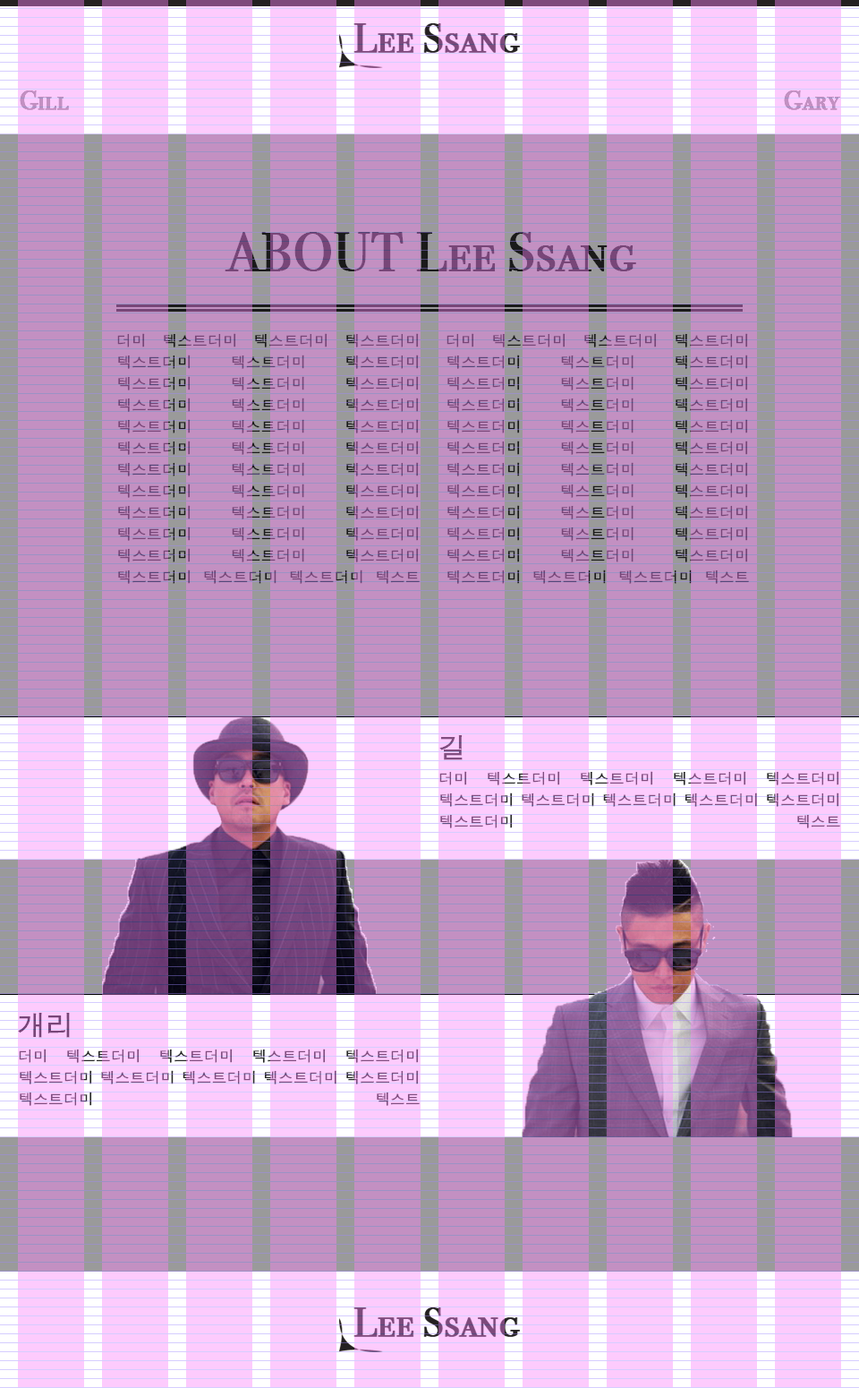
<style>
.page{position:relative;width:859px;height:1388px}
.page>*{position:absolute;margin:0}
.t1{font:26.9px "BodoniSvtyTwoSCITCTT-Book";letter-spacing:-0.005em;color:#c390c2;font-weight:bold}
.t2{font:54.6px "BodoniSvtyTwoSCITCTT-Book";letter-spacing:-0.005em;font-weight:bold}
.t3{font:14.3px "AppleGothic";letter-spacing:-0.005em;font-weight:bold}
.t4{font:28px "AppleGothic";letter-spacing:-0.005em;color:#814e80;font-weight:bold}
.t5{font:14.3px "AppleGothic";letter-spacing:-0.005em;color:#814e80;font-weight:bold}
.t6{font:28px "AppleGothic";letter-spacing:-0.005em;color:#784678;font-weight:bold}
</style>
<div class="page">
<p class="t1" style="left:20px;top:90px;width:49px;height:20px">Gill</p>
<p class="t1" style="left:20px;top:90px;width:49px;height:20px">Gill</p>
<p class="t1" style="left:784px;top:90px;width:57px;height:20px">Gary</p>
<p class="t1" style="left:784px;top:90px;width:57px;height:20px">Gary</p>
<p class="t2" style="left:225px;top:232px;width:411px;height:39px">ABOUT Lee Ssang</p>
<p class="t3" style="left:117px;top:333px;width:303px;height:251px;text-align:justify">더미 텍스트더미 텍스트더미 텍스트더미 텍스트더미 텍스트더미 텍스트더미 텍스트더미 텍스트더미 텍스트더미 텍스트더미 텍스트더미 텍스트더미 텍스트더미 텍스트더미 텍스트더미 텍스트더미 텍스트더미 텍스트더미 텍스트더미 텍스트더미 텍스트더미 텍스트더미 텍스트더미 텍스트더미 텍스트더미 텍스트더미 텍스트더미 텍스트더미 텍스트더미 텍스트더미 텍스트더미 텍스트더미 텍스트더미 텍스트더미 텍스트더미 텍스트더미 텍스트</p>
<p class="t3" style="left:447px;top:333px;width:302px;height:251px;text-align:justify">더미 텍스트더미 텍스트더미 텍스트더미 텍스트더미 텍스트더미 텍스트더미 텍스트더미 텍스트더미 텍스트더미 텍스트더미 텍스트더미 텍스트더미 텍스트더미 텍스트더미 텍스트더미 텍스트더미 텍스트더미 텍스트더미 텍스트더미 텍스트더미 텍스트더미 텍스트더미 텍스트더미 텍스트더미 텍스트더미 텍스트더미 텍스트더미 텍스트더미 텍스트더미 텍스트더미 텍스트더미 텍스트더미 텍스트더미 텍스트더미 텍스트더미 텍스트더미 텍스트</p>
<p class="t4" style="left:440px;top:735px;width:23px;height:25px">길</p>
<p class="t5" style="left:440px;top:771px;width:401px;height:57px;text-align:justify">더미 텍스트더미 텍스트더미 텍스트더미 텍스트더미 텍스트더미 텍스트더미 텍스트더미 텍스트더미 텍스트더미 텍스트더미 텍스트</p>
<p class="t6" style="left:18px;top:1012px;width:52px;height:26px">개리</p>
<p class="t5" style="left:19px;top:1048px;width:401px;height:58px;text-align:justify">더미 텍스트더미 텍스트더미 텍스트더미 텍스트더미 텍스트더미 텍스트더미 텍스트더미 텍스트더미 텍스트더미 텍스트더미 텍스트</p>
</div>
